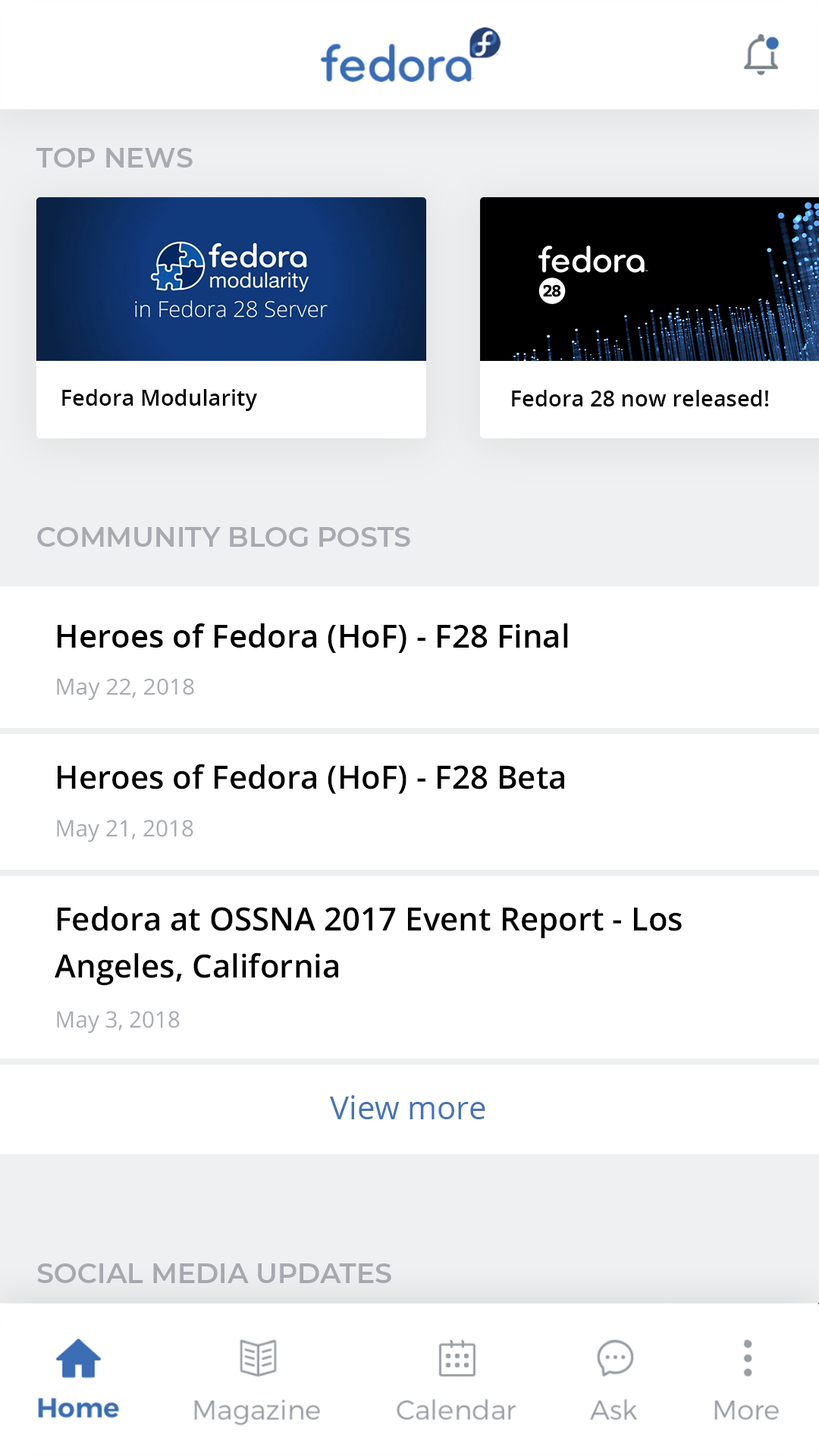
<style>
.page{position:relative;width:819px;height:1456px;background:#ffffff}
.page>*{position:absolute;margin:0}
.t1{font:27.6px "Montserrat-SemiBold";color:#a7abb1}
.t2{font:22.1px "OpenSans-Semibold";color:#000000}
.t3{font:31.9px "OpenSans-Semibold";color:#000000}
.t4{font:22.7px "OpenSans";color:#a7abb1}
.t5{font:32px "OpenSans-Semibold";color:#000000}
.t6{font:32px/47.4px "OpenSans-Semibold";color:#000000}
.t7{font:22.5px "OpenSans";color:#a7abb1}
.t8{font:31.6px "OpenSans";color:#4474b9}
</style>
<div class="page">
<p class="t1" style="left:36px;top:148px;width:157px;height:20px">TOP NEWS</p>
<p class="t2" style="left:62px;top:389px;width:195px;height:22px">Fedora Modularity</p>
<p class="t2" style="left:512px;top:390px;width:257px;height:16px">Fedora 28 now released!</p>
<p class="t1" style="left:37px;top:527px;width:373px;height:20px">COMMUNITY BLOG POSTS</p>
<p class="t3" style="left:57px;top:623px;width:511px;height:30px">Heroes of Fedora (HoF) - F28 Final</p>
<p class="t4" style="left:57px;top:679px;width:137px;height:21px">May 22, 2018</p>
<p class="t5" style="left:58px;top:764px;width:506px;height:30px">Heroes of Fedora (HoF) - F28 Beta</p>
<p class="t4" style="left:57px;top:820px;width:136px;height:22px">May 21, 2018</p>
<p class="t6" style="left:55px;top:906px;width:627px;height:80px">Fedora at OSSNA 2017 Event Report - Los<br>Angeles, California</p>
<p class="t7" style="left:57px;top:1011px;width:123px;height:23px">May 3, 2018</p>
<p class="t8" style="left:330px;top:1095px;width:155px;height:24px">View more</p>
<p class="t1" style="left:37px;top:1263px;width:354px;height:20px">SOCIAL MEDIA UPDATES</p>
</div>
